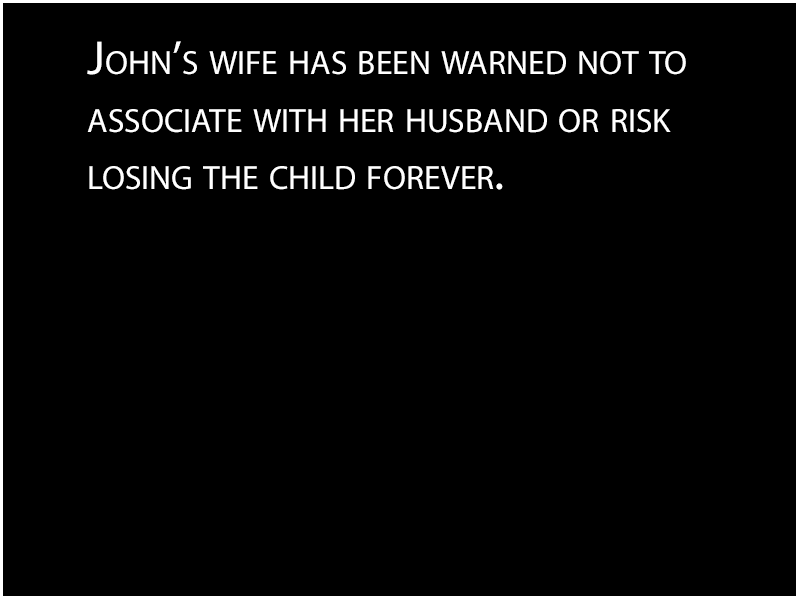
<style>
.page{position:relative;width:800px;height:600px;background:#000000}
.page>*{position:absolute;margin:0}
.t1{font:48px "MyriadPro-Regular";color:#ffffff;font-variant:small-caps}
</style>
<div class="page">
<p class="t1" style="left:87px;top:41px;width:599px;height:149px">John’s wife has been warned not to <br>associate with her husband or risk<br>losing the child forever.</p>
</div>
